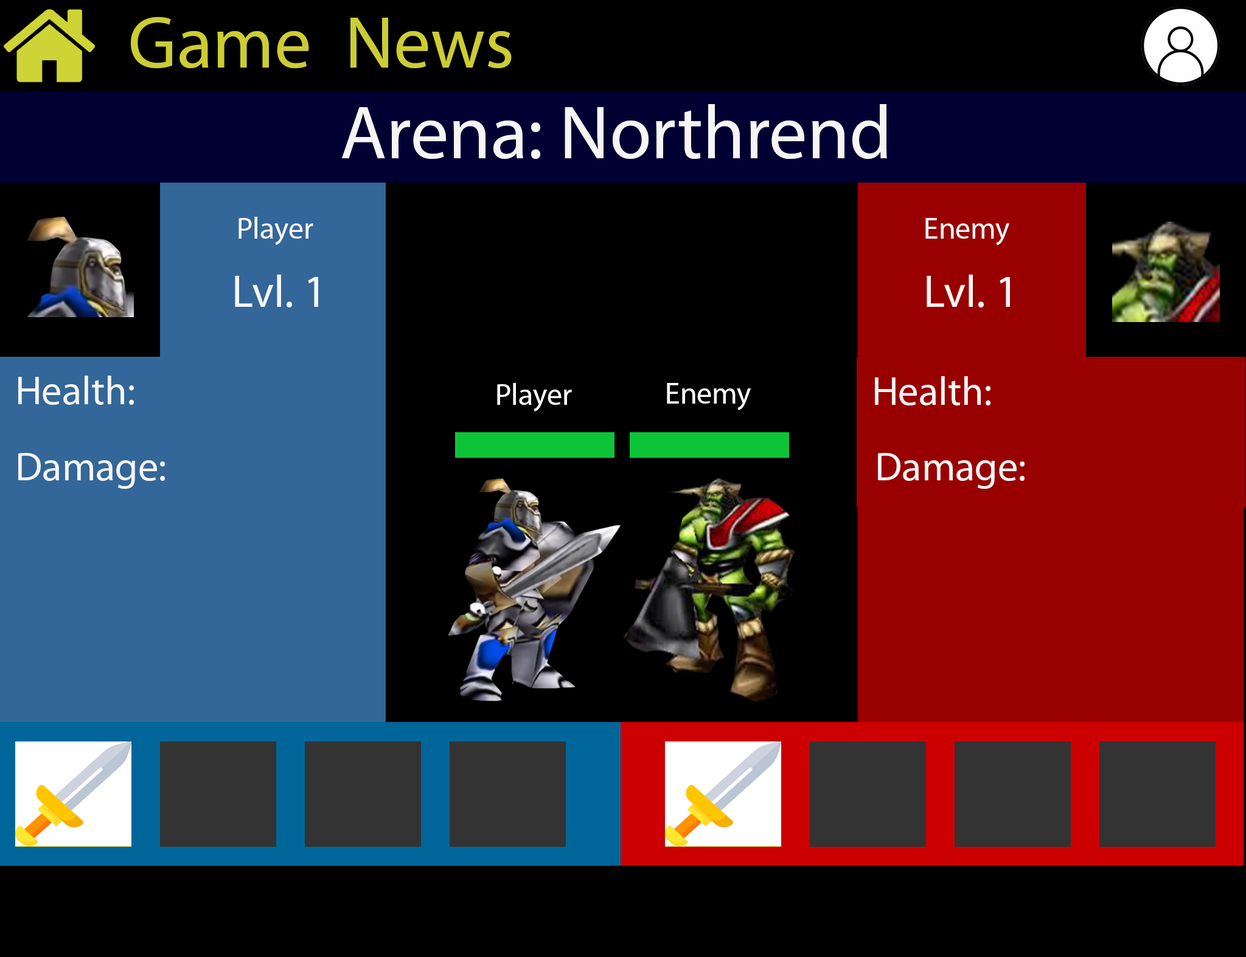
<style>
.page{position:relative;width:1246px;height:957px;background:#000000}
.page>*{position:absolute;margin:0}
.t1{font:74.1px "MyriadPro-Regular";color:#cccc33}
.t2{font:76.1px "MyriadPro-Regular";color:#f5f5f5}
.t3{font:30.4px "MyriadPro-Regular";color:#f5f5f5}
.t4{font:45.6px "MyriadPro-Regular";color:#f5f5f5}
.t5{font:40.6px "MyriadPro-Regular";color:#f5f5f5}
.t6{font:30.4px "MyriadPro-Regular";color:#ffffff}
</style>
<div class="page">
<p class="t1" style="left:131px;top:16px;width:178px;height:53px">Game</p>
<p class="t1" style="left:351px;top:18px;width:161px;height:51px">News</p>
<p class="t2" style="left:342px;top:104px;width:545px;height:55px">Arena: Northrend</p>
<p class="t3" style="left:239px;top:217px;width:74px;height:28px">Player</p>
<p class="t3" style="left:926px;top:218px;width:84px;height:27px">Enemy</p>
<p class="t4" style="left:235px;top:274px;width:83px;height:33px">Lvl. 1</p>
<p class="t4" style="left:927px;top:274px;width:83px;height:33px">Lvl. 1</p>
<p class="t5" style="left:18px;top:376px;width:116px;height:29px">Health:</p>
<p class="t5" style="left:875px;top:376px;width:116px;height:29px">Health:</p>
<p class="t6" style="left:497px;top:383px;width:75px;height:28px">Player</p>
<p class="t6" style="left:667px;top:383px;width:84px;height:27px">Enemy</p>
<p class="t5" style="left:18px;top:453px;width:147px;height:36px">Damage:</p>
<p class="t5" style="left:878px;top:453px;width:147px;height:36px">Damage:</p>
</div>
